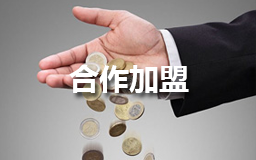
<style>
.page{position:relative;width:256px;height:160px}
.page>*{position:absolute;margin:0}
.t1{font:30px "MicrosoftYaHei-Bold";color:#ffffff}
</style>
<div class="page">
<p class="t1" style="left:69px;top:65px;width:120px;height:28px">合作加盟</p>
</div>
